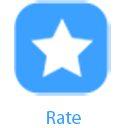
<style>
.page{position:relative;width:128px;height:128px;background:#ffffff}
.page>*{position:absolute;margin:0}
.t1{font:19.2px "MyriadPro-Regular";color:#3ca0ff}
</style>
<div class="page">
<p class="t1" style="left:47px;top:111px;width:34px;height:13px">Rate</p>
</div>
